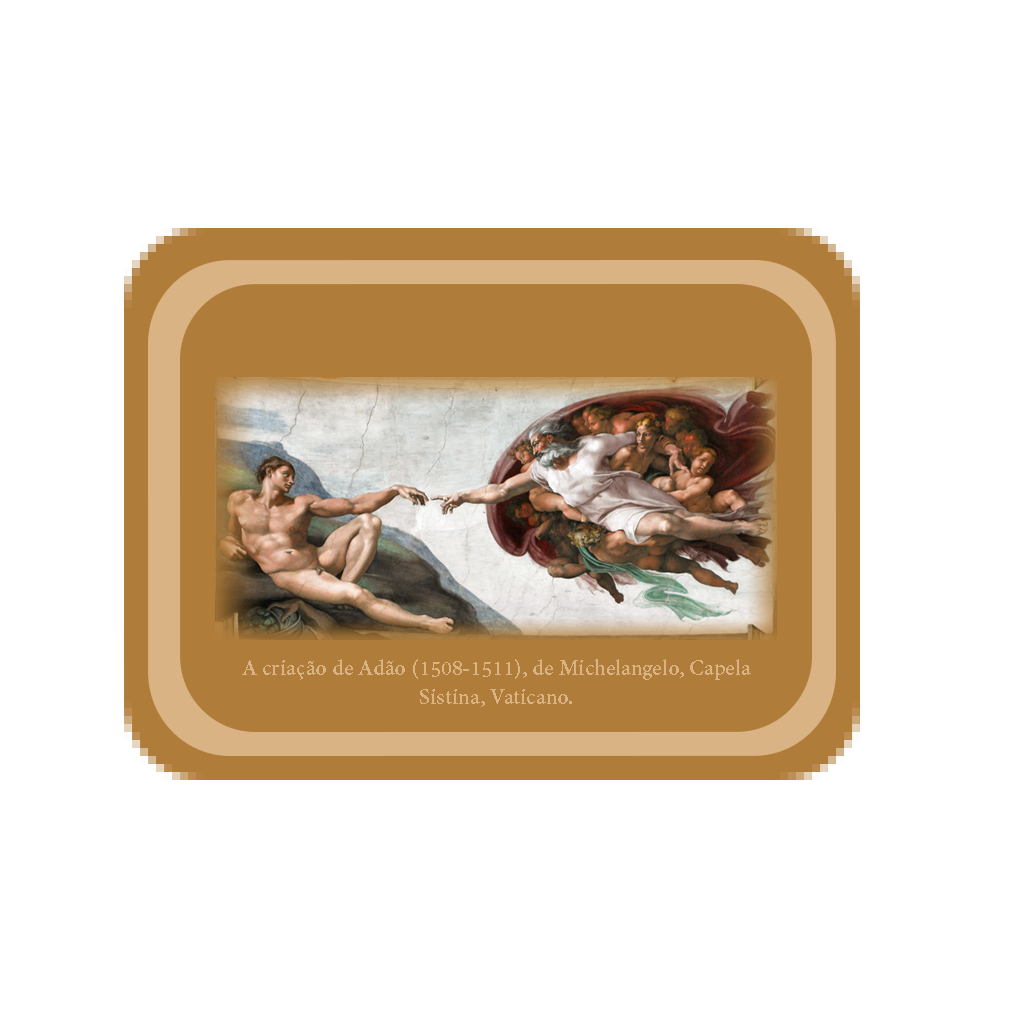
<style>
.page{position:relative;width:1024px;height:1024px;background:#ffffff}
.page>*{position:absolute;margin:0}
.t1{font:24.2px "AdobeDevanagari-Bold";color:#d9b383}
</style>
<div class="page">
<p class="t1" style="left:242px;top:659px;width:509px;height:48px;text-align:center">A criação de Adão (1508-1511), de Michelangelo, Capela Sistina, Vaticano.</p>
</div>
